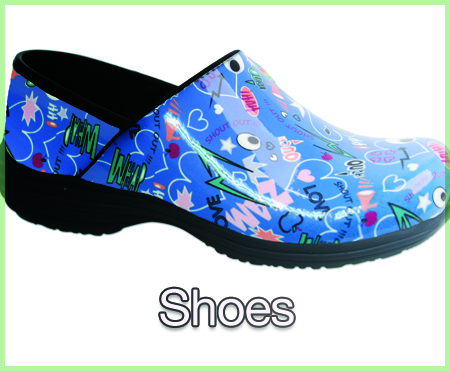
<style>
.page{position:relative;width:450px;height:371px;background:#ffffff}
.page>*{position:absolute;margin:0}
.t1{font:50px "HelveticaNeue";letter-spacing:-0.02em;color:#faf2fe}
</style>
<div class="page">
<p class="t1" style="left:160px;top:288px;width:134px;height:38px">Shoes</p>
</div>
